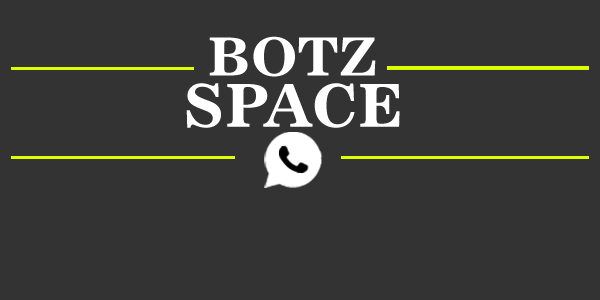
<style>
.page{position:relative;width:600px;height:300px;background:#333333}
.page>*{position:absolute;margin:0}
.t1{font:52.7px "News701BT-BoldA";color:#ffffff}
.t2{font:59.4px "News701BT-BoldA";color:#ffffff}
</style>
<div class="page">
<p class="t1" style="left:209px;top:36px;width:167px;height:41px">BOTZ</p>
<p class="t2" style="left:186px;top:83px;width:214px;height:45px">SPACE</p>
</div>
